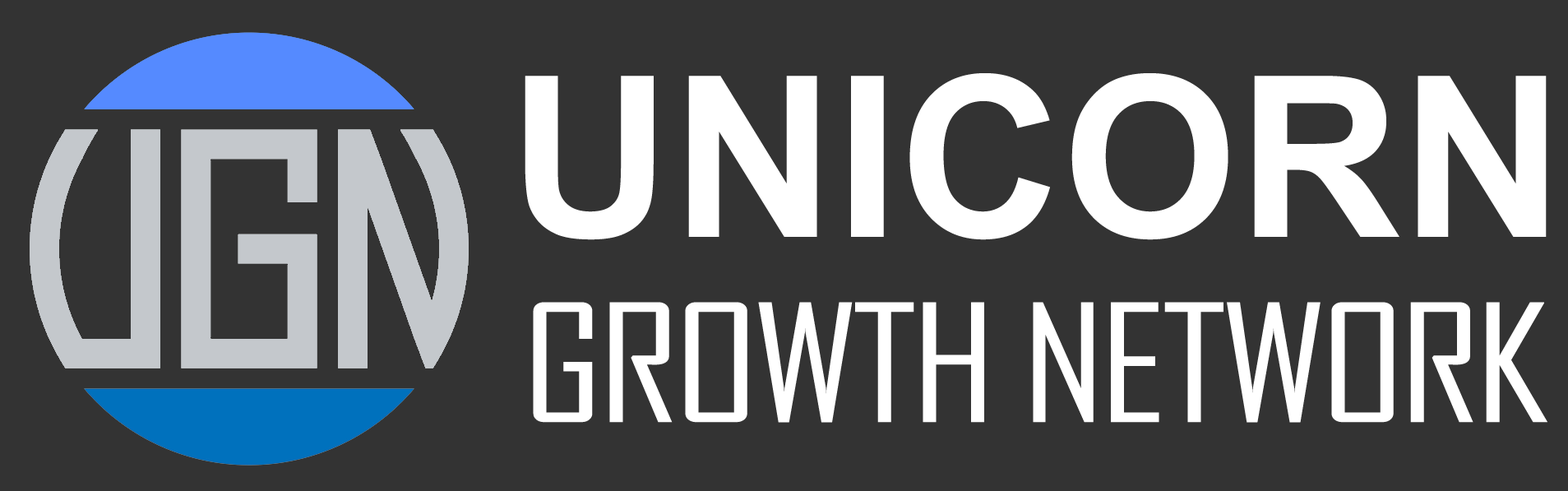
<style>
.page{position:relative;width:1568px;height:491px;background:#333333}
.page>*{position:absolute;margin:0}
.t1{font:224.5px "Arial-BoldMT";letter-spacing:-0.03em;color:#ffffff;text-transform:uppercase}
.t2{font:156.4px "AgencyFB-Reg";letter-spacing:-0.03em;color:#ffffff;text-transform:uppercase;scale:1.22 1}
</style>
<div class="page">
<p class="t1" style="left:525px;top:73px;width:1022px;height:167px">UNICORN</p>
<p class="t2" style="left:533px;top:302px;width:1014px;height:121px">GROWTH NETWORK</p>
</div>
